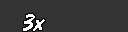
<style>
.page{position:relative;width:128px;height:32px;background:#333333}
.page>*{position:absolute;margin:0}
.t1{font:26px "DomDiagonalBT-Regular";color:#ffffff;scale:1.1 1}
</style>
<div class="page">
<p class="t1" style="left:23px;top:14px;width:22px;height:17px">3x</p>
</div>
